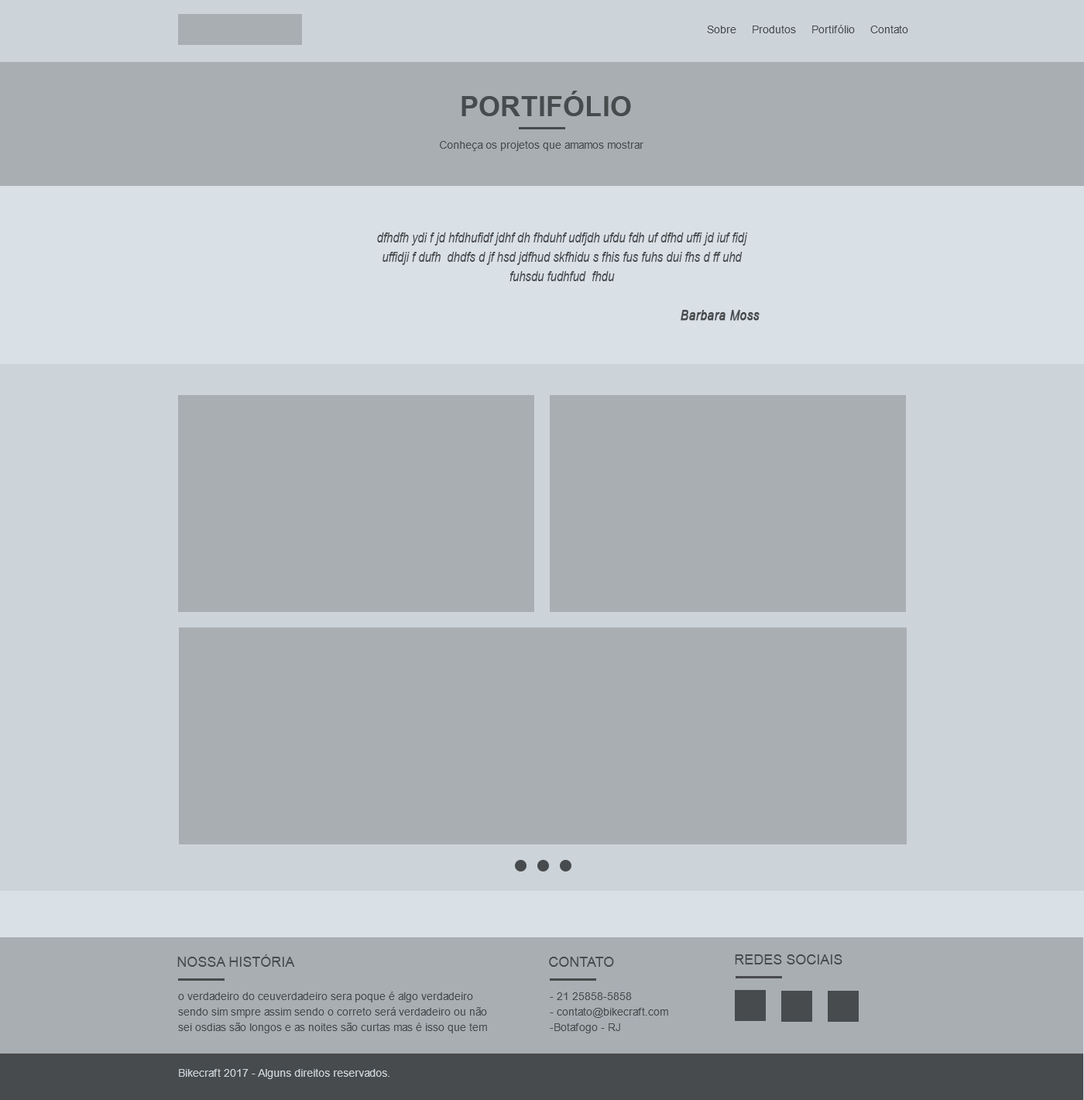
<style>
.page{position:relative;width:1084px;height:1100px;background:#a9aeb3}
.page>*{position:absolute;margin:0}
.t1{font:10.8px "ArialMT";color:#484b4d}
.t2{font:27.9px "Arial-BoldMT";color:#484b4d;text-transform:uppercase}
.t3{font:13.9px/19.4px "Arial-ItalicMT";color:#484b4d;scale:0.82 1}
.t4{font:13.9px/19.4px "Arial-ItalicMT";color:#484b4d;font-weight:bold;scale:0.82 1}
.t5{font:13.9px "ArialMT";color:#484b4d;text-transform:uppercase}
.t6{font:10.8px/15.5px "ArialMT";color:#484b4d}
.t7{font:10.8px "ArialMT";color:#ccd4da}
</style>
<div class="page">
<p class="t1" style="left:707px;top:25px;width:201px;height:8px">Sobre     Produtos     Portifólio     Contato</p>
<p class="t2" style="left:462px;top:91px;width:169px;height:25px">PORTIFÓLIO</p>
<p class="t1" style="left:440px;top:141px;width:204px;height:10px">Conheça os projetos que amamos mostrar</p>
<p class="t3" style="left:377px;top:232px;width:383px;height:89px;text-align:center">dfhdfh ydi f jd hfdhufidf jdhf dh fhduhf udfjdh ufdu fdh uf dfhd uffi jd iuf fidj uffidji f dufh  dhdfs d jf hsd jdfhud skfhidu s fhis fus fuhs dui fhs d ff uhd fuhsdu fudhfud  fhdu<br><br><span class="t4">Barbara Moss</span></p>
<p class="t5" style="left:177px;top:954px;width:118px;height:13px">Nossa História</p>
<p class="t5" style="left:549px;top:956px;width:65px;height:11px">CONTATO</p>
<p class="t5" style="left:735px;top:954px;width:108px;height:10px">REDES SOCIAIS</p>
<p class="t6" style="left:178px;top:991px;width:309px;height:42px">o verdadeiro do ceuverdadeiro sera poque é algo verdadeiro sendo sim smpre assim sendo o correto será verdadeiro ou não sei osdias são longos e as noites são curtas mas é isso que tem</p>
<p class="t6" style="left:550px;top:992px;width:118px;height:41px">- 21 25858-5858<br>- contato@bikecraft.com<br>-Botafogo - RJ</p>
<p class="t7" style="left:179px;top:1069px;width:211px;height:10px">Bikecraft 2017 - Alguns direitos reservados.</p>
</div>
